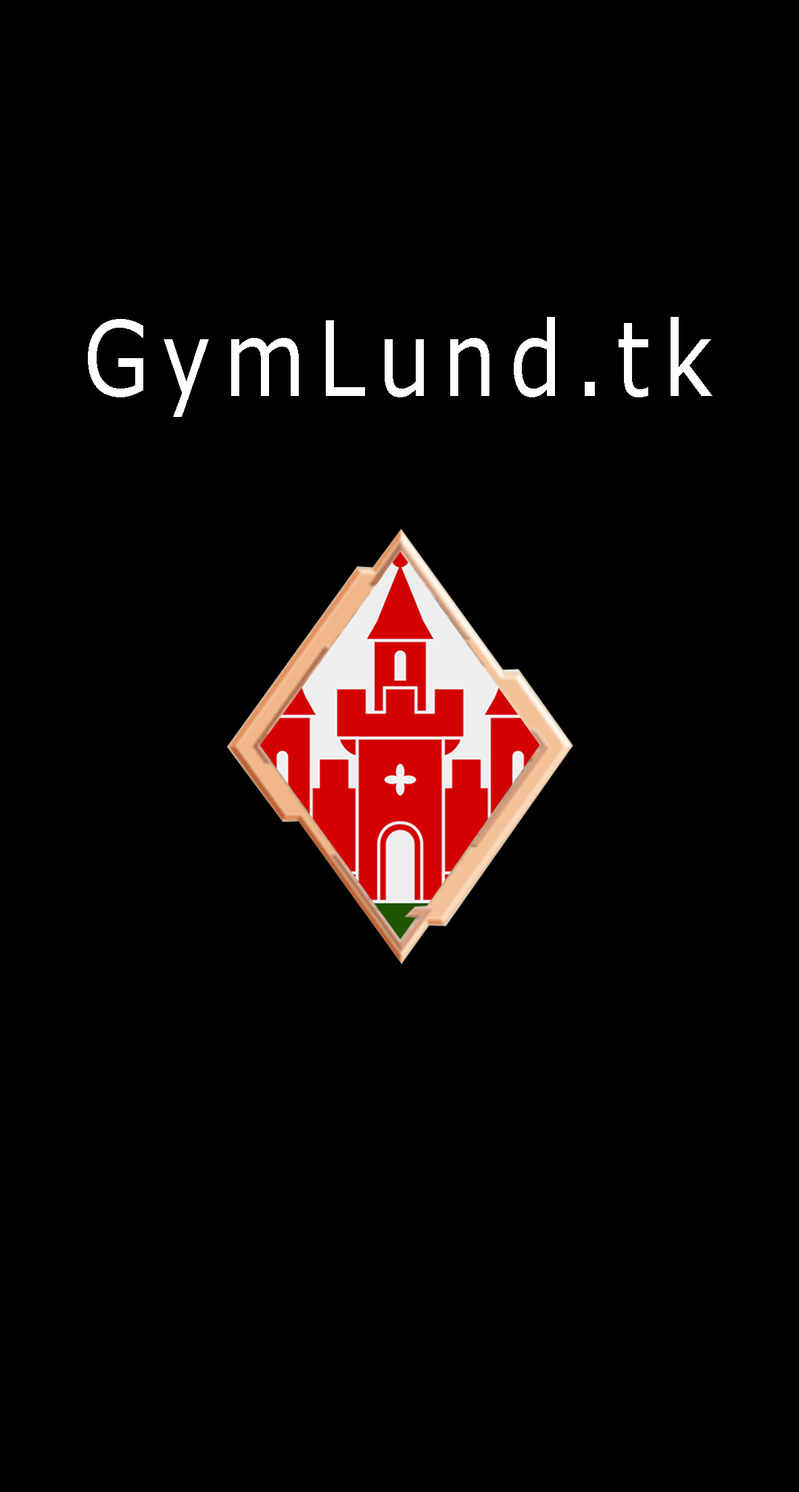
<style>
.page{position:relative;width:799px;height:1492px;background:#000000}
.page>*{position:absolute;margin:0}
.t1{font:103.9px "Verdana";letter-spacing:0.14em;color:#ffffff;scale:0.82 1}
</style>
<div class="page">
<p class="t1" style="left:88px;top:317px;width:624px;height:100px">GymLund.tk</p>
</div>
